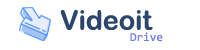
<style>
.page{position:relative;width:200px;height:50px;background:#ffffff}
.page>*{position:absolute;margin:0}
.t1{font:27px "ArialRoundedMTBold";color:#2c466b}
.t2{font:12px "Consolas";color:#717fe9}
</style>
<div class="page">
<p class="t1" style="left:60px;top:9px;width:93px;height:21px">Videoit</p>
<p class="t2" style="left:130px;top:32px;width:33px;height:10px">Drive</p>
</div>
